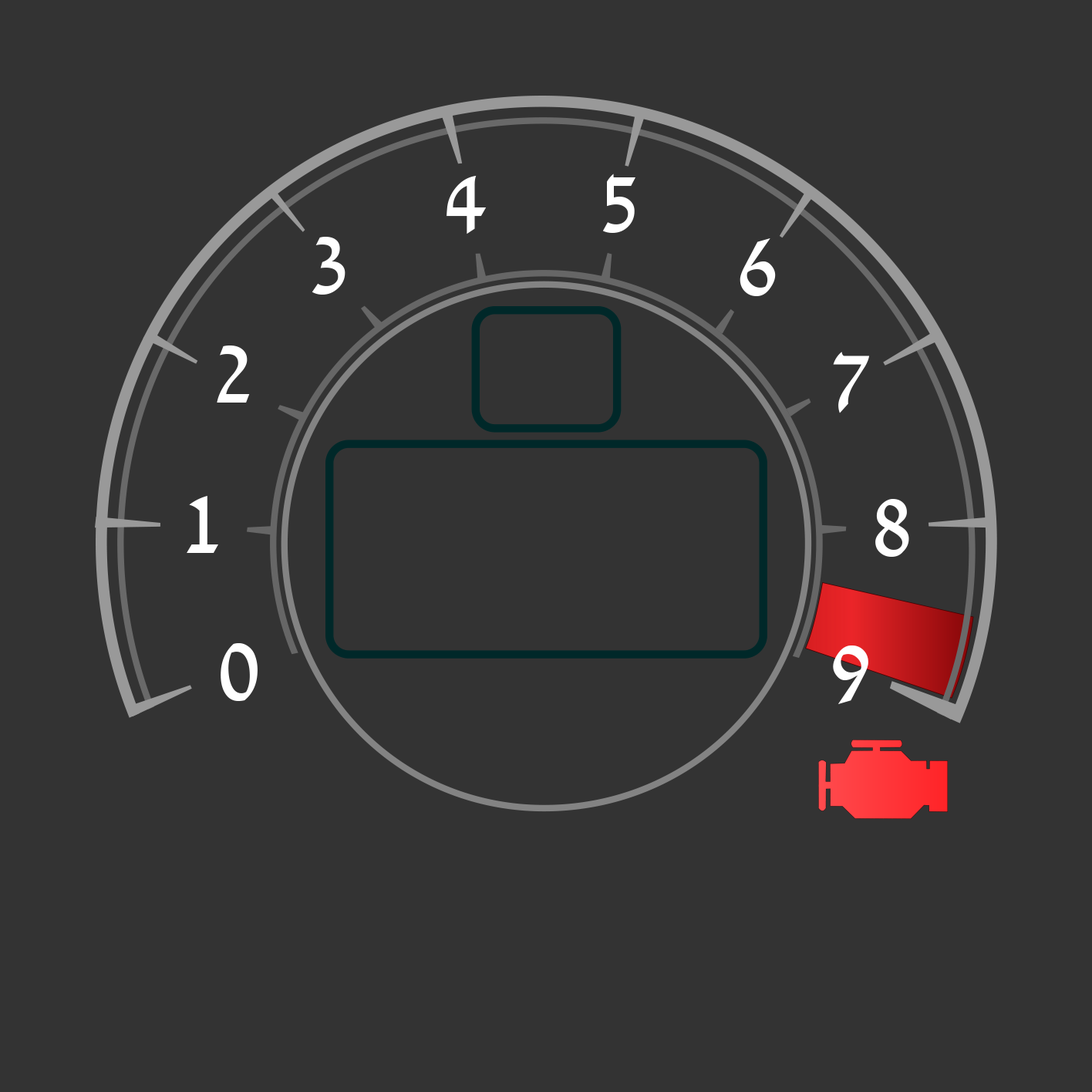
<style>
.page{position:relative;width:1092px;height:1092px;background:#333333}
.page>*{position:absolute;margin:0}
.t1{font:96.4px "David";color:#ffffff}
</style>
<div class="page">
<p class="t1" style="left:602px;top:174px;width:33px;height:59px">5</p>
<p class="t1" style="left:447px;top:176px;width:40px;height:58px">4</p>
<p class="t1" style="left:312px;top:237px;width:33px;height:58px">3</p>
<p class="t1" style="left:740px;top:238px;width:36px;height:58px">6</p>
<p class="t1" style="left:217px;top:345px;width:33px;height:58px">2</p>
<p class="t1" style="left:833px;top:352px;width:37px;height:61px">7</p>
<p class="t1" style="left:187px;top:496px;width:31px;height:57px">1</p>
<p class="t1" style="left:875px;top:499px;width:34px;height:58px">8</p>
<p class="t1" style="left:221px;top:643px;width:37px;height:58px">0</p>
<p class="t1" style="left:833px;top:645px;width:35px;height:59px">9</p>
</div>
